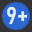
<style>
.page{position:relative;width:32px;height:32px;background:#2c66d2}
.page>*{position:absolute;margin:0}
.t1{font:23.9px "Bahnschrift-SemiBold";color:#dfeef3;scale:0.9 1}
</style>
<div class="page">
<p class="t1" style="left:7px;top:6px;width:21px;height:19px">9+</p>
</div>
